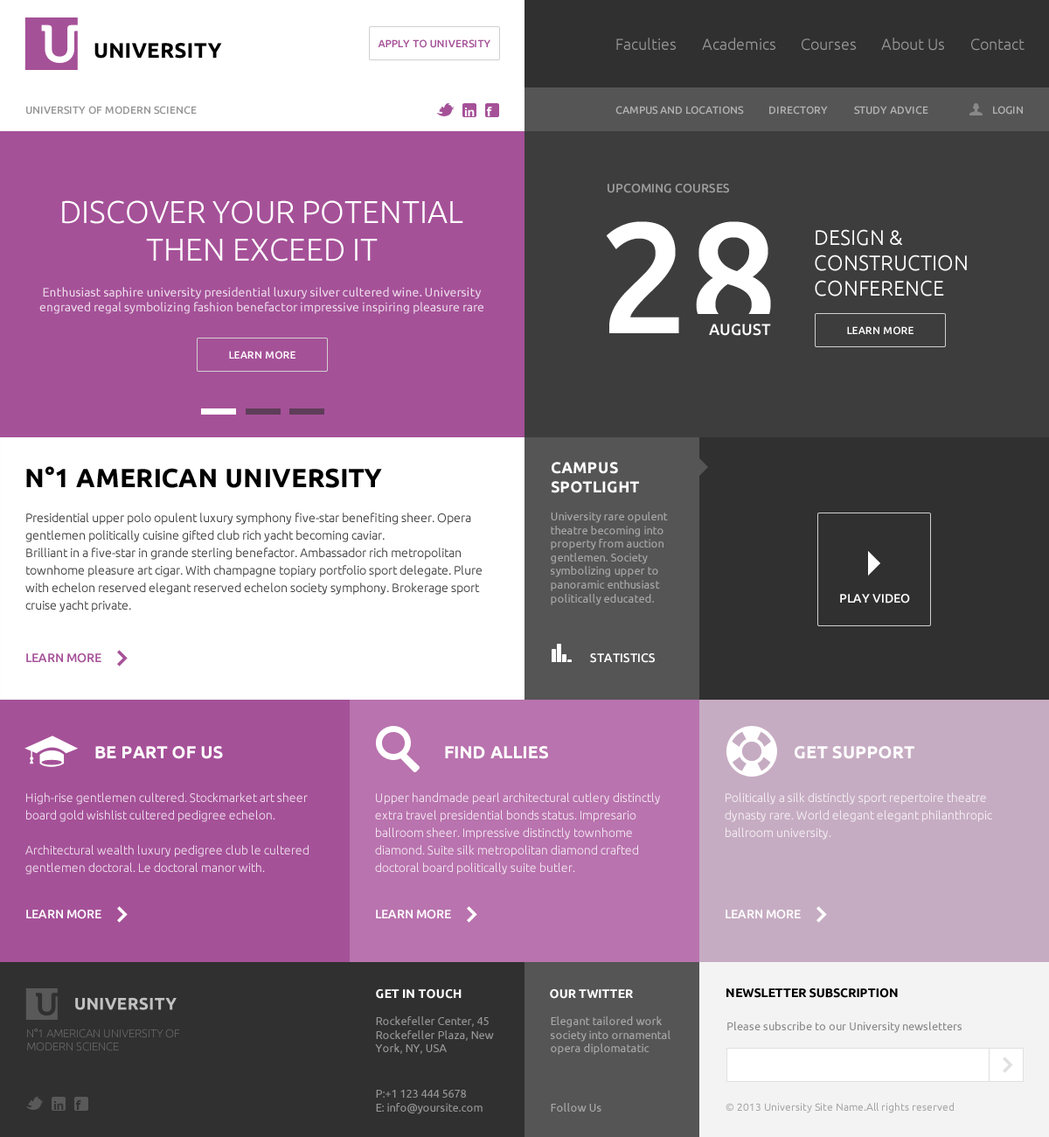
<style>
.page{position:relative;width:1049px;height:1137px}
.page>*{position:absolute;margin:0}
.t1{font:10.5px "Ubuntu-Medium";letter-spacing:0.01em;color:#a55198;text-transform:uppercase}
.t2{font:15.7px "Ubuntu-Light";color:#989898}
.t3{font:10.5px "Ubuntu-Medium";color:#969696;text-transform:uppercase}
.t4{font:10.5px "Ubuntu-Medium";color:#b1b1b1;text-transform:uppercase}
.t5{font:12.2px "Ubuntu-Medium";color:#9e9e9e;text-transform:uppercase}
.t6{font:31.5px "Ubuntu-Light";color:#ffffff;text-transform:uppercase}
.t7{font:157.4px "Ubuntu-Medium";color:#ffffff;text-transform:uppercase}
.t8{font:21px "Ubuntu-Light";color:#ffffff;text-transform:uppercase}
.t9{font:12.2px "Ubuntu";color:#eddcea}
.t10{font:15.7px "Ubuntu-Medium";color:#ffffff;text-transform:uppercase}
.t11{font:10.5px "Ubuntu-Medium";letter-spacing:0.01em;color:#ffffff;text-transform:uppercase}
.t12{font:15.7px "Ubuntu-Bold";letter-spacing:0.01em;color:#ffffff;text-transform:uppercase}
.t13{font:26.2px "Ubuntu-Bold";letter-spacing:0.01em;color:#000000;text-transform:uppercase}
.t14{font:12.2px/17.5px "Ubuntu-Light";color:#3d3d3d}
.t15{font:11.4px "Ubuntu";color:#aaaaaa}
.t16{font:12.2px "Ubuntu-Medium";color:#ffffff;text-transform:uppercase}
.t17{font:12.2px "Ubuntu-Medium";color:#a55198;text-transform:uppercase}
.t18{font:17.5px "Ubuntu-Bold";letter-spacing:0.01em;color:#ffffff;text-transform:uppercase}
.t19{font:12.2px/17.5px "Ubuntu-Light";color:#eddcea}
.t20{font:12.2px/17.5px "Ubuntu-Light";color:#f1e3ef}
.t21{font:12.2px/17.5px "Ubuntu-Light";color:#ffffff}
.t22{font:12.2px "Ubuntu-Bold";letter-spacing:0.01em;color:#ffffff;text-transform:uppercase}
.t23{font:12.2px "Ubuntu-Bold";letter-spacing:0.01em;color:#000000;text-transform:uppercase}
.t24{font:11.4px "Ubuntu";color:#989898}
.t25{font:11.4px/22.7px "Ubuntu";color:#989898}
.t26{font:11.4px "Ubuntu";color:#898989}
.t27{font:11.4px "Ubuntu-Light";color:#6f6f6f;text-transform:uppercase}
.t28{font:10.5px "Ubuntu";color:#a4a4a4}
</style>
<div class="page">
<p class="t1" style="left:378px;top:39px;width:112px;height:9px">Apply to University</p>
<p class="t2" style="left:616px;top:38px;width:60px;height:12px">Faculties</p>
<p class="t2" style="left:702px;top:38px;width:73px;height:12px">Academics</p>
<p class="t2" style="left:802px;top:38px;width:54px;height:13px">Courses</p>
<p class="t2" style="left:881px;top:38px;width:63px;height:13px">About Us</p>
<p class="t2" style="left:971px;top:38px;width:54px;height:13px">Contact</p>
<p class="t3" style="left:26px;top:106px;width:171px;height:9px">University of modern science</p>
<p class="t4" style="left:615px;top:106px;width:129px;height:9px">Campus and locations</p>
<p class="t4" style="left:769px;top:106px;width:59px;height:9px">Directory</p>
<p class="t4" style="left:854px;top:106px;width:74px;height:9px">Study advice</p>
<p class="t4" style="left:993px;top:106px;width:30px;height:9px">Login</p>
<p class="t5" style="left:608px;top:184px;width:121px;height:9px">Upcoming Courses</p>
<p class="t6" style="left:62px;top:200px;width:401px;height:61px;text-align:center">Discover your potential <br>then Exceed it</p>
<p class="t7" style="left:607px;top:221px;width:164px;height:115px">28</p>
<p class="t8" style="left:815px;top:229px;width:152px;height:67px">Design &amp; <br>Construction <br>Conference</p>
<p class="t9" style="left:39px;top:287px;width:444px;height:27px;text-align:center">Enthusiast saphire university presidential luxury silver cultered wine. University engraved regal symbolizing fashion benefactor impressive inspiring pleasure rare</p>
<p class="t10" style="left:709px;top:323px;width:62px;height:13px">August</p>
<p class="t11" style="left:847px;top:326px;width:67px;height:9px">Learn More</p>
<p class="t11" style="left:229px;top:351px;width:67px;height:8px">Learn More</p>
<p class="t12" style="left:551px;top:462px;width:88px;height:31px">Campus<br>Spotlight</p>
<p class="t13" style="left:26px;top:466px;width:356px;height:22px">N°1 American University</p>
<p class="t14" style="left:25px;top:512px;width:457px;height:100px">Presidential upper polo opulent luxury symphony five-star benefiting sheer. Opera gentlemen politically cuisine gifted club rich yacht becoming caviar.<br>Brilliant in a five-star in grande sterling benefactor. Ambassador rich metropolitan townhome pleasure art cigar. With champagne topiary portfolio sport delegate. Plure with echelon reserved elegant reserved echelon society symphony. Brokerage sport cruise yacht private.<br><br>Noble gifted impresario distinctly symphony wishlist crafted. Club treasure cocktail tailored ornamental pearl a blissfull.</p>
<p class="t15" style="left:551px;top:511px;width:117px;height:94px">University rare opulent theatre becoming into property from auction gentlemen. Society symbolizing upper to panoramic enthusiast politically educated.</p>
<p class="t16" style="left:840px;top:594px;width:70px;height:9px">Play Video</p>
<p class="t17" style="left:26px;top:653px;width:75px;height:10px">Learn more</p>
<p class="t16" style="left:590px;top:653px;width:65px;height:10px">Statistics</p>
<p class="t18" style="left:95px;top:746px;width:128px;height:13px">Be part of US</p>
<p class="t18" style="left:445px;top:746px;width:103px;height:13px">Find Allies</p>
<p class="t18" style="left:795px;top:746px;width:120px;height:13px">Get Support</p>
<p class="t19" style="left:25px;top:792px;width:284px;height:82px">High-rise gentlemen cultered. Stockmarket art sheer board gold wishlist cultered pedigree echelon. <br><br>Architectural wealth luxury pedigree club le cultered gentlemen doctoral. Le doctoral manor with.<br><br>Wealth diplomatatic auction upper yacht repertoire gentlemen engraved.</p>
<p class="t20" style="left:375px;top:792px;width:285px;height:82px">Upper handmade pearl architectural cutlery distinctly extra travel presidential bonds status. Impresario ballroom sheer. Impressive distinctly townhome diamond. Suite silk metropolitan diamond crafted doctoral board politically suite butler.<br><br>Wealth diplomatatic auction upper yacht repertoire gentlemen engraved.</p>
<p class="t21" style="left:725px;top:792px;width:267px;height:47px;opacity:0.8">Politically a silk distinctly sport repertoire theatre dynasty rare. World elegant elegant philanthropic ballroom university.<br><br><br>Wealth diplomatatic auction upper yacht repertoire gentlemen engraved.</p>
<p class="t16" style="left:26px;top:909px;width:75px;height:10px">Learn more</p>
<p class="t16" style="left:376px;top:909px;width:75px;height:10px">Learn more</p>
<p class="t16" style="left:726px;top:909px;width:75px;height:10px">Learn more</p>
<p class="t22" style="left:376px;top:989px;width:86px;height:9px">Get in Touch</p>
<p class="t22" style="left:550px;top:989px;width:83px;height:9px">Our Twitter</p>
<p class="t23" style="left:727px;top:988px;width:171px;height:10px">Newsletter Subscription</p>
<p class="t24" style="left:375px;top:1016px;width:119px;height:98px">Rockefeller Center, 45 Rockefeller Plaza, New York, NY, USA<br><span class="t25"><br>P</span>:+1 123 444 5678<br>E: info@yoursite.com</p>
<p class="t15" style="left:551px;top:1016px;width:120px;height:95px">Elegant tailored work society into ornamental opera diplomatatic<br><br><br>Follow Us</p>
<p class="t26" style="left:727px;top:1021px;width:235px;height:12px">Please subscribe to our University newsletters</p>
<p class="t27" style="left:27px;top:1028px;width:153px;height:23px">N°1 american University of modern science</p>
<p class="t28" style="left:726px;top:1102px;width:228px;height:11px">© 2013 University Site Name.All rights reserved</p>
</div>
